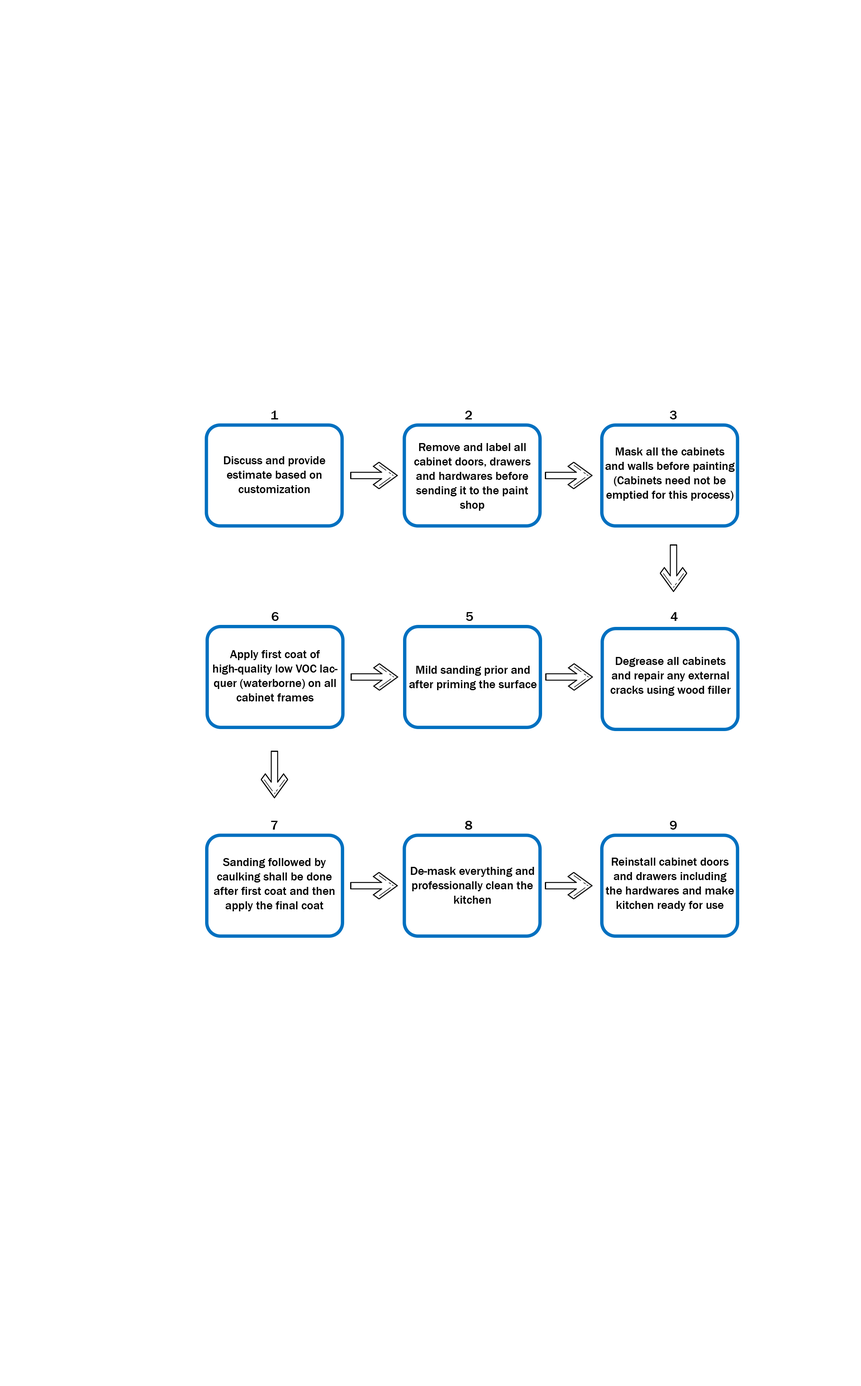
<style>
.page{position:relative;width:861px;height:1386px;background:#ffffff}
.page>*{position:absolute;margin:0}
.t1{font:13.1px "FranklinGothic-Medium";color:#000000}
.t2{font:12px "FranklinGothic-Medium";color:#000000}
</style>
<div class="page">
<p class="t1" style="left:271px;top:410px;width:7px;height:9px">1</p>
<p class="t1" style="left:465px;top:410px;width:7px;height:9px">2</p>
<p class="t1" style="left:670px;top:410px;width:6px;height:9px">3</p>
<p class="t2" style="left:414px;top:443px;width:116px;height:68px;text-align:center">Remove and label all cabinet doors, drawers and hardwares before sending it to the paint shop</p>
<p class="t2" style="left:605px;top:447px;width:129px;height:54px;text-align:center">Mask all the cabinets and walls before painting (Cabinets need not be emptied for this process)</p>
<p class="t2" style="left:224px;top:456px;width:101px;height:37px;text-align:center">Discuss and provide <br>estimate based on <br>customization</p>
<p class="t1" style="left:272px;top:612px;width:7px;height:9px">6</p>
<p class="t1" style="left:466px;top:612px;width:7px;height:9px">5</p>
<p class="t1" style="left:670px;top:612px;width:8px;height:9px">4</p>
<p class="t2" style="left:213px;top:650px;width:125px;height:51px;text-align:center">Apply first coat of high-quality low VOC lacquer (waterborne) on all cabinet frames</p>
<p class="t2" style="left:409px;top:666px;width:128px;height:24px;text-align:center">Mild sanding prior and after priming the surface</p>
<p class="t2" style="left:610px;top:657px;width:120px;height:39px;text-align:center">Degrease all cabinets and repair any external cracks using wood filler</p>
<p class="t1" style="left:271px;top:821px;width:7px;height:8px">7</p>
<p class="t1" style="left:465px;top:821px;width:7px;height:8px">8</p>
<p class="t1" style="left:670px;top:821px;width:6px;height:8px">9</p>
<p class="t2" style="left:214px;top:858px;width:120px;height:53px;text-align:center">Sanding followed by caulking shall be done after first coat and then apply the final coat</p>
<p class="t2" style="left:605px;top:857px;width:129px;height:54px;text-align:center">Reinstall cabinet doors and drawers including the hardwares and make kitchen ready for use</p>
<p class="t2" style="left:410px;top:867px;width:124px;height:36px;text-align:center">De-mask everything and professionally clean the kitchen</p>
</div>
